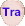
<style>
.page{position:relative;width:25px;height:26px}
.page>*{position:absolute;margin:0}
.t1{font:12px "LaoUI-Bold";color:#3e08d1}
</style>
<div class="page">
<p class="t1" style="left:2px;top:7px;width:19px;height:9px">Tra</p>
</div>
